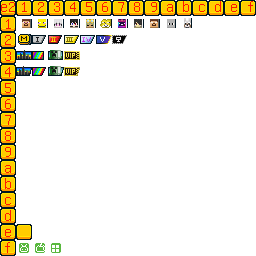
<style>
.page{position:relative;width:256px;height:256px;background:#ffffff}
.page>*{position:absolute;margin:0}
.t1{font:16px "GNUUnifontFull";letter-spacing:0.005em;color:#ff1600}
.t2{font:16px/16px "GNUUnifontFull";letter-spacing:0.005em;color:#ff1600}
</style>
<div class="page">
<p class="t1" style="left:1px;top:2px;width:14px;height:10px">e2</p>
<p class="t1" style="left:22px;top:1px;width:231px;height:11px">1 2 3 4 5 6 7 8 9 a b c d e f</p>
<p class="t2" style="left:5px;top:19px;width:6px;height:234px">1<br>2<br>3<br>4<br>5<br>6<br>7<br>8<br>9<br>a<br>b<br>c<br>d<br>e<br>f</p>
</div>
